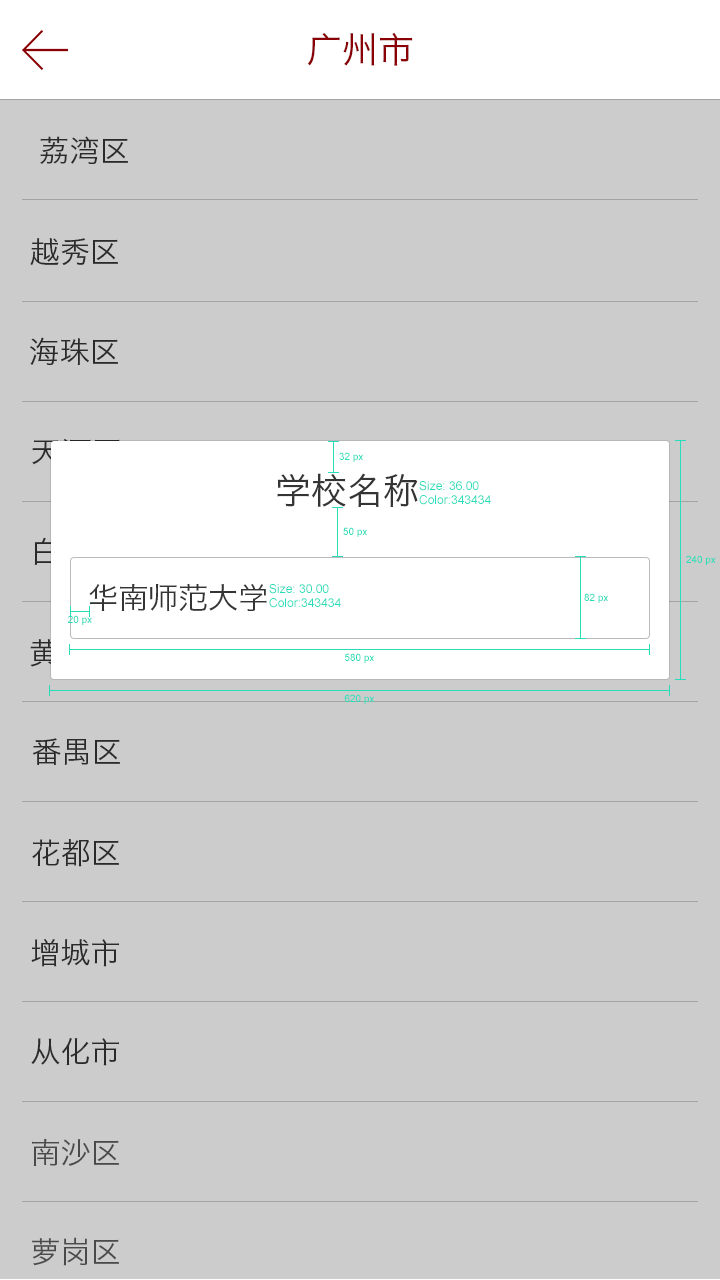
<style>
.page{position:relative;width:720px;height:1280px;background:#cccccc}
.page>*{position:absolute;margin:0}
.t1{font:36px "HiraginoSansGB-W3";color:#8a0105}
.t2{font:30px "HiraginoSansGB-W3";color:#2a2a2a}
.t3{font:30px "HiraginoSansGB-W3"}
.t4{font:10px "ArialMT";color:#28ddb9}
.t5{font:36px "HiraginoSansGB-W3";color:#343434}
.t6{font:12px "ArialMT";color:#28ddb9}
.t7{font:30px "HiraginoSansGB-W3";color:#343434}
.t8{font:30px "HiraginoSansGB-W3";color:#4a4a4a}
</style>
<div class="page">
<p class="t1" style="left:307px;top:32px;width:106px;height:34px">广州市</p>
<p class="t2" style="left:40px;top:136px;width:88px;height:28px">荔湾区</p>
<p class="t2" style="left:30px;top:238px;width:88px;height:28px">越秀区</p>
<p class="t2" style="left:30px;top:337px;width:88px;height:28px">海珠区</p>
<p class="t3" style="left:32px;top:438px;width:88px;height:27px">天河区</p>
<p class="t4" style="left:339px;top:452px;width:24px;height:10px">32 px</p>
<p class="t5" style="left:277px;top:473px;width:141px;height:34px">学校名称</p>
<p class="t6" style="left:419px;top:481px;width:72px;height:24px">Size: 36.00<br>Color:343434</p>
<p class="t4" style="left:343px;top:527px;width:24px;height:10px">50 px</p>
<p class="t4" style="left:686px;top:555px;width:30px;height:10px">240 px</p>
<p class="t7" style="left:89px;top:584px;width:178px;height:27px">华南师范大学</p>
<p class="t6" style="left:269px;top:584px;width:72px;height:24px">Size: 30.00<br>Color:343434</p>
<p class="t4" style="left:584px;top:593px;width:24px;height:10px">82 px</p>
<p class="t4" style="left:68px;top:615px;width:24px;height:10px">20 px</p>
<p class="t4" style="left:345px;top:653px;width:29px;height:10px">580 px</p>
<p class="t4" style="left:344px;top:694px;width:30px;height:10px">620 px</p>
<p class="t2" style="left:32px;top:738px;width:88px;height:27px">番禺区</p>
<p class="t2" style="left:32px;top:839px;width:87px;height:28px">花都区</p>
<p class="t2" style="left:31px;top:939px;width:88px;height:28px">增城市</p>
<p class="t2" style="left:31px;top:1038px;width:88px;height:28px">从化市</p>
<p class="t8" style="left:32px;top:1139px;width:87px;height:27px">南沙区</p>
<p class="t8" style="left:32px;top:1237px;width:87px;height:29px">萝岗区</p>
</div>
